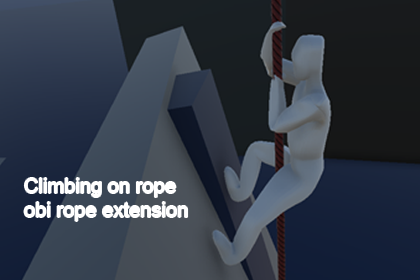
<style>
.page{position:relative;width:420px;height:280px}
.page>*{position:absolute;margin:0}
.t1{font:20.1px "ArialMT";color:#ffffff}
</style>
<div class="page">
<p class="t1" style="left:24px;top:178px;width:164px;height:43px">Climbing on rope<br>obi rope extension</p>
</div>
